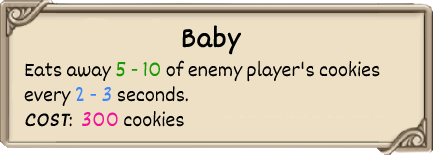
<style>
.page{position:relative;width:433px;height:155px;background:#ede0c4}
.page>*{position:absolute;margin:0}
.t1{font:30px "Dekko";color:#000000;font-weight:bold}
.t2{font:21px "Dekko";color:#000000}
.t3{font:21px "Dekko";color:#1b9902}
.t4{font:21px "Dekko";color:#4086fa}
.t5{font:21px "Dekko";color:#000000;font-weight:bold;font-style:italic}
.t6{font:21px "Dekko";color:#f0129a}
</style>
<div class="page">
<p class="t1" style="left:182px;top:25px;width:60px;height:30px">Baby</p>
<p class="t2" style="left:24px;top:60px;width:356px;height:67px">Eats away <span class="t3">5 - 10 </span>of enemy player's cookies<br>every <span class="t4">2 - 3 </span>seconds.<br><span class="t5">COST</span>:  <span class="t6">300 </span>cookies</p>
</div>
